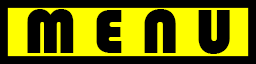
<style>
.page{position:relative;width:256px;height:64px;background:#000000}
.page>*{position:absolute;margin:0}
.t1{font:65px "Bauhaus93";color:#000000}
</style>
<div class="page">
<p class="t1" style="left:27px;top:9px;width:203px;height:45px">M E N U<br> T qQQ</p>
</div>
